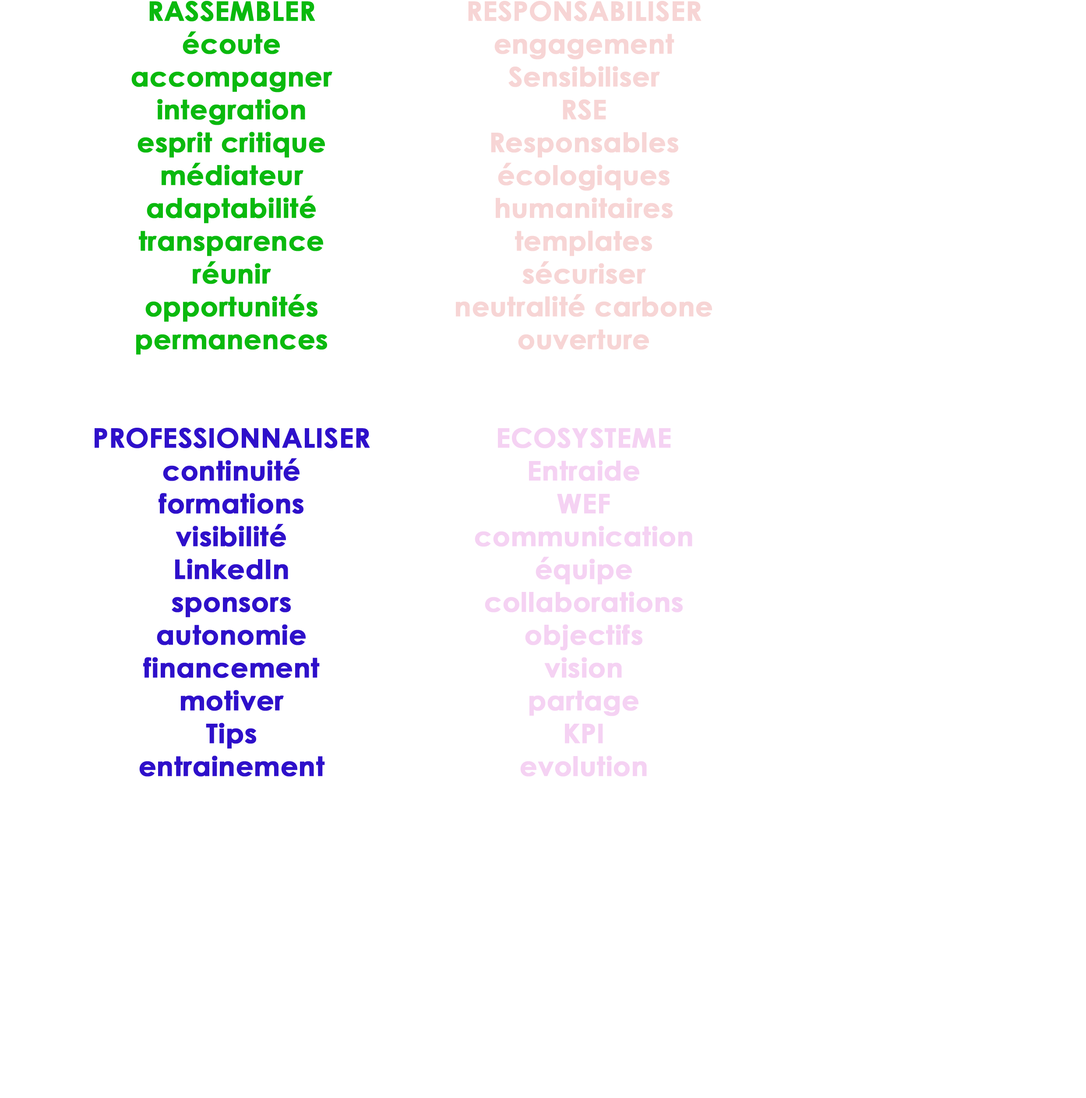
<style>
.page{position:relative;width:1086px;height:1098px;background:#ffffff}
.page>*{position:absolute;margin:0}
.t1{font:26.8px "CenturyGothic-Bold";color:#0ab90e;font-weight:bold}
.t2{font:26.8px "CenturyGothic-Bold";color:#2e10ca;font-weight:bold}
.t3{font:26.8px "CenturyGothic-Bold";font-weight:bold}
</style>
<div class="page">
<p class="t1" style="left:95px;top:1px;width:275px;height:776px;text-align:center">RASSEMBLER<br>écoute<br>accompagner<br>integration<br>esprit critique<br>médiateur<br>adaptabilité<br>transparence<br>réunir<br>opportunités<br>permanences<br><br><br><span class="t2">PROFESSIONNALISER<br>continuité<br>formations<br>visibilité<br>LinkedIn<br>sponsors<br>autonomie<br>financement<br>motiver<br>Tips<br>entrainement</span></p>
<p class="t3" style="left:456px;top:1px;width:256px;height:776px;text-align:center">RESPONSABILISER<br>engagement<br>Sensibiliser<br>RSE<br>Responsables<br>écologiques<br>humanitaires<br>templates<br>sécuriser<br>neutralité carbone<br>ouverture<br><br><br>ECOSYSTEME<br>Entraide<br>WEF<br>communication<br>équipe<br>collaborations<br>objectifs<br>vision<br>partage<br>KPI<br>evolution</p>
</div>
